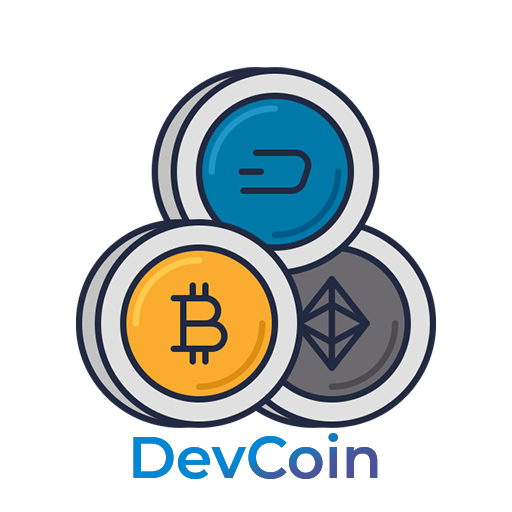
<style>
.page{position:relative;width:512px;height:512px;background:#ffffff}
.page>*{position:absolute;margin:0}
.t1{font:58.6px "Montserrat-SemiBold"}
</style>
<div class="page">
<p class="t1" style="left:133px;top:433px;width:245px;height:46px">DevCoin</p>
</div>
